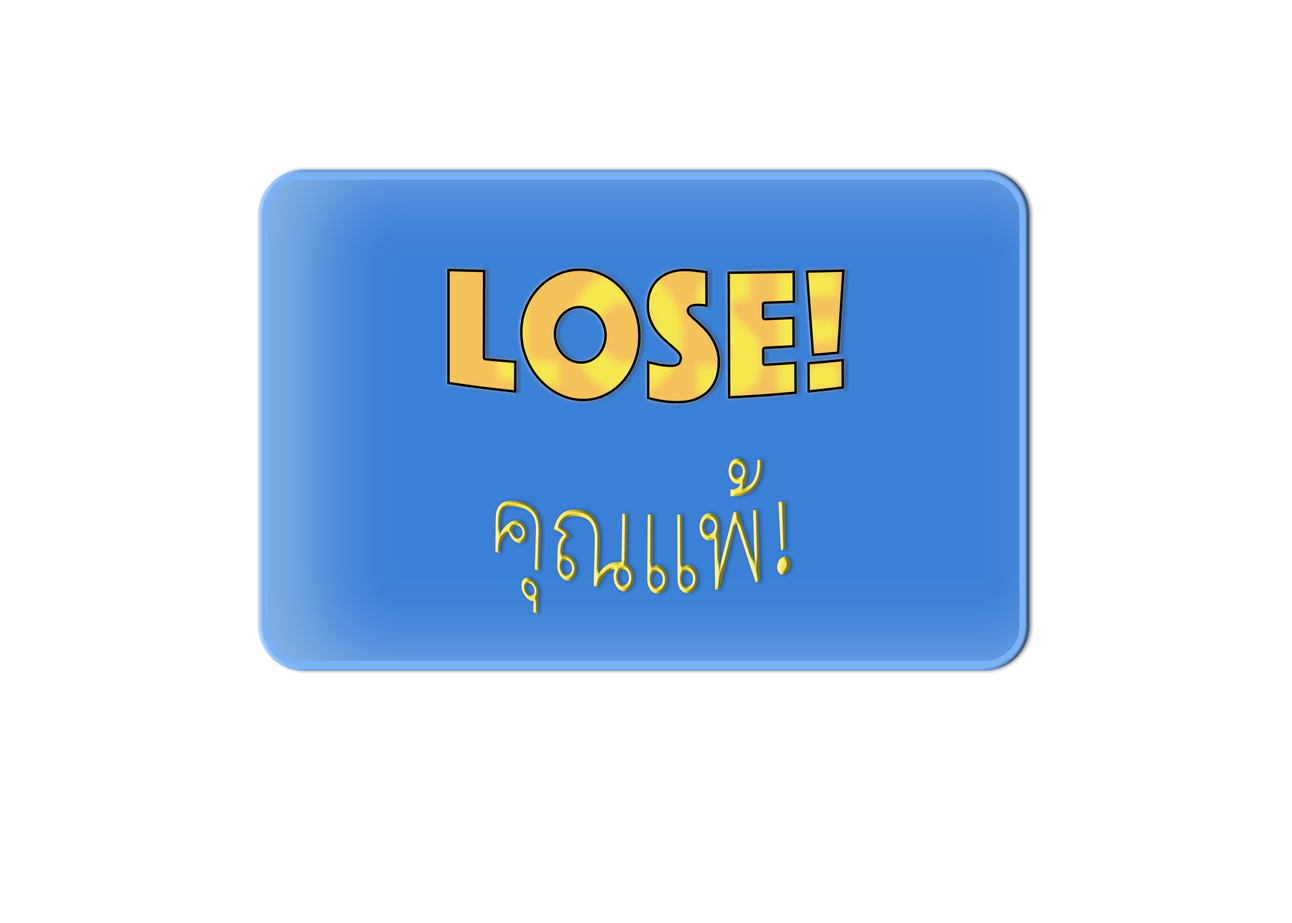
<style>
.page{position:relative;width:1292px;height:923px;background:#ffffff}
.page>*{position:absolute;margin:0}
.t1{font:171.7px "Phosphate-Solid"}
.t2{font:123.1px "TH-Chara"}
</style>
<div class="page">
<p class="t1" style="left:447px;top:268px;width:398px;height:136px">lose!</p>
<p class="t2" style="left:495px;top:458px;width:296px;height:157px">คุณแพ้!</p>
</div>
